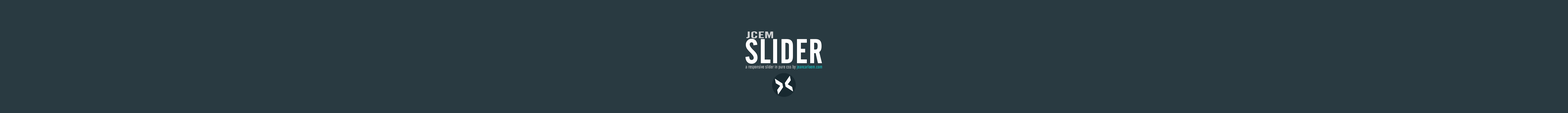
<style>
.page{position:relative;width:1568px;height:113px;background:#293a41}
.page>*{position:absolute;margin:0}
.t1{font:58px "AlternateGothicNo2BT-Regular";color:#ffffff;font-weight:bold}
.t2{font:16.1px "AlternateGothicNo2BT-Regular";color:#cfd1d2;scale:1.86 1}
.t3{font:8.3px "AlternateGothicNo2BT-Regular";letter-spacing:0.007em}
</style>
<div class="page">
<p class="t1" style="left:745px;top:39px;width:77px;height:25px">SLIDER</p>
<p class="t2" style="left:746px;top:31px;width:27px;height:7px">JCEM</p>
<p class="t3" style="left:746px;top:65px;width:76px;height:4px">a responsive slider in pure css by jeancarloem.com</p>
</div>
